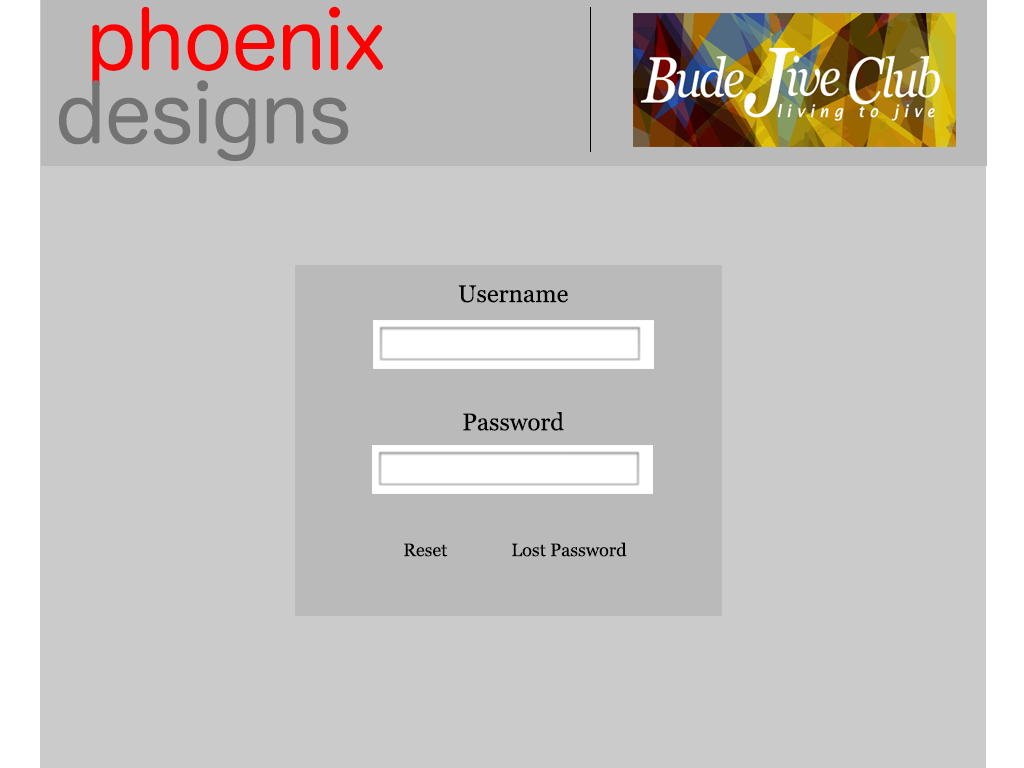
<style>
.page{position:relative;width:1024px;height:768px;background:#cbcbcb}
.page>*{position:absolute;margin:0}
.t1{font:79.7px "HiraMaruProN-W4";color:#ff0000}
.t2{font:79.7px "HiraMaruPro-W4";color:#737373}
.t3{font:24px "Georgia";color:#000000}
.t4{font:18px "Georgia";color:#000000}
</style>
<div class="page">
<p class="t1" style="left:92px;top:6px;width:291px;height:81px">phoenix</p>
<p class="t2" style="left:59px;top:80px;width:290px;height:81px">designs</p>
<p class="t3" style="left:458px;top:285px;width:110px;height:18px">Username</p>
<p class="t3" style="left:463px;top:412px;width:101px;height:19px">Password</p>
<p class="t4" style="left:404px;top:542px;width:223px;height:15px">Reset  Lost Password</p>
</div>
